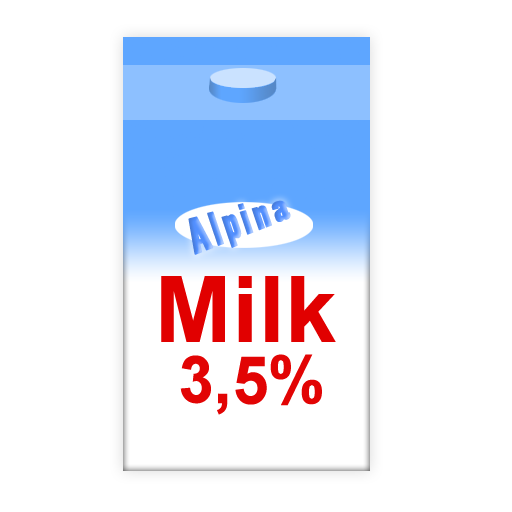
<style>
.page{position:relative;width:512px;height:512px;background:#ffffff}
.page>*{position:absolute;margin:0}
.t1{font:41px "PoplarStd";letter-spacing:0.1em}
.t2{font:92px "Arial-BoldMT";letter-spacing:0.01em;color:#e00000}
.t3{font:64px "Arial-BoldMT";letter-spacing:0.01em;color:#e20404}
</style>
<div class="page">
<p class="t1" style="left:188px;top:200px;width:103px;height:55px;rotate:-19deg">Alpina</p>
<p class="t2" style="left:161px;top:276px;width:175px;height:66px">Milk</p>
<p class="t3" style="left:180px;top:354px;width:142px;height:61px">3,5%</p>
</div>
